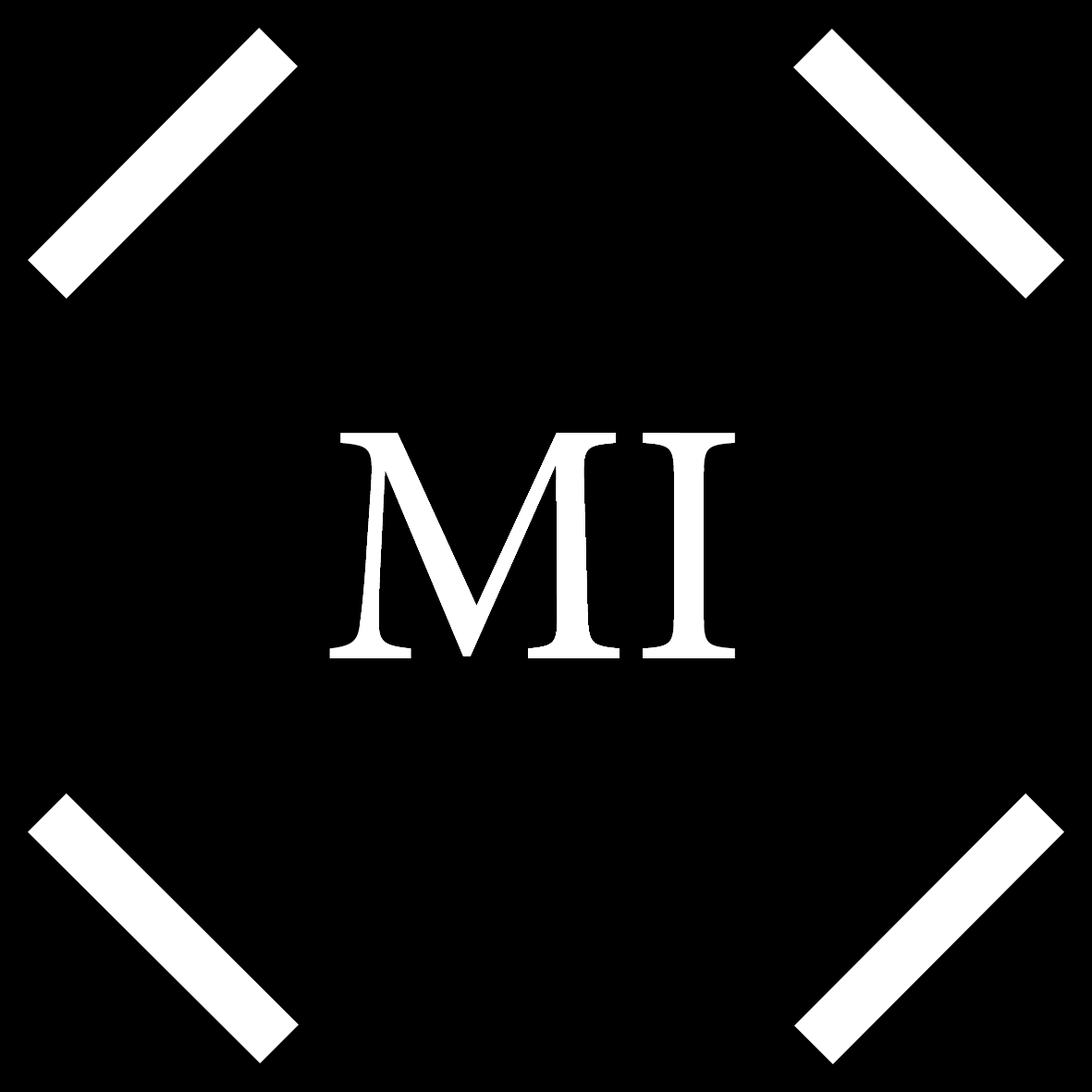
<style>
.page{position:relative;width:1092px;height:1092px;background:#000000}
.page>*{position:absolute;margin:0}
.t1{font:346.7px "MinionPro-Regular";color:#ffffff}
</style>
<div class="page">
<p class="t1" style="left:329px;top:433px;width:291px;height:225px">M</p>
<p class="t1" style="left:643px;top:433px;width:92px;height:225px">I</p>
</div>
